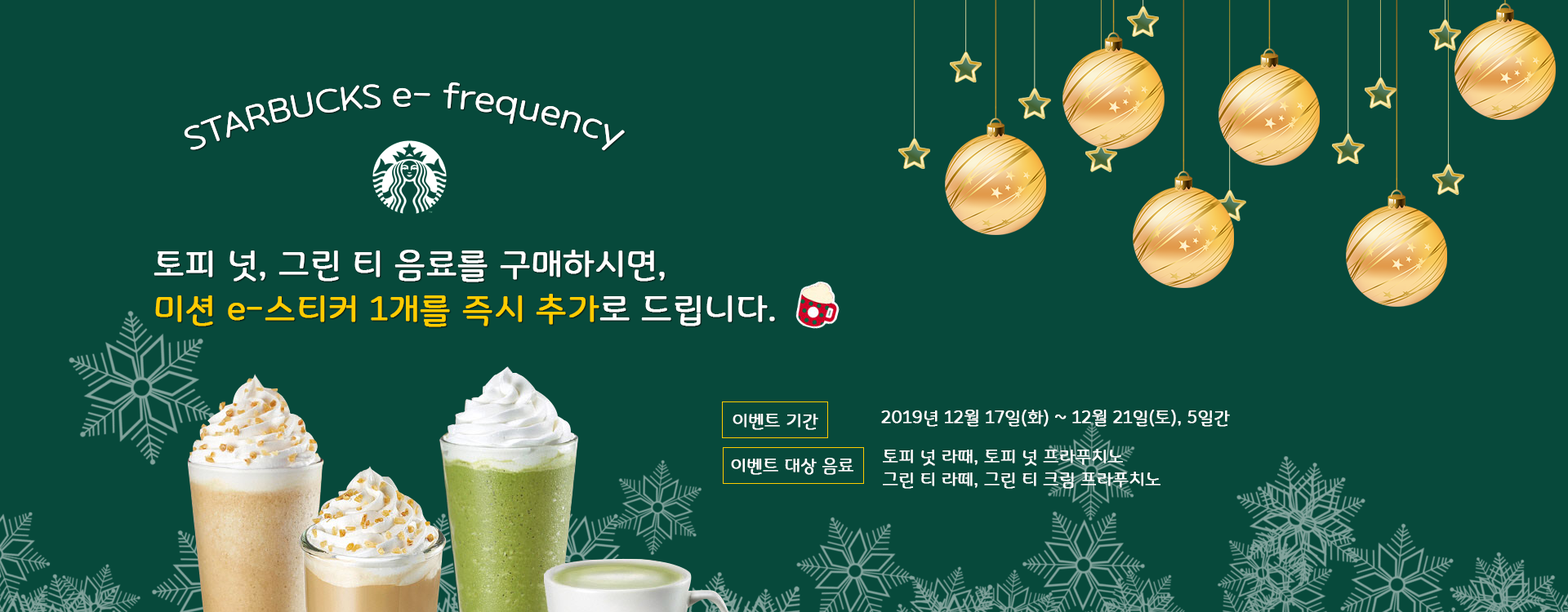
<style>
.page{position:relative;width:1568px;height:612px;background:#07493b}
.page>*{position:absolute;margin:0}
.t1{font:33.6px/22.5px "Binggrae";letter-spacing:-0.02em;color:#ffffff}
.t2{font:32px/22.5px "Binggrae";letter-spacing:-0.02em;color:#ffffff}
.t3{font:32px/22.5px "Binggrae";letter-spacing:-0.02em;color:#ffffff;font-weight:bold}
.t4{font:32px/22.5px "Binggrae";letter-spacing:-0.02em;color:#ffcc00;font-weight:bold}
.t5{font:16.3px "Binggrae";letter-spacing:-0.02em;color:#ffffff;font-weight:bold}
.t6{font:16.3px/22.5px "Binggrae";letter-spacing:-0.02em;color:#ffffff;font-weight:bold}
</style>
<div class="page">
<p class="t1" style="left:184px;top:82px;width:441px;height:69px"><span class="t2">STARBUCKS </span>e- frequency</p>
<p class="t1" style="left:184px;top:82px;width:441px;height:69px"><span class="t2">STARBUCKS </span>e- frequency</p>
<p class="t3" style="left:154px;top:250px;width:621px;height:77px">토피 넛, 그린 티 음료를 구매하시면,<br><br><span class="t4">미션 e-스티커 1개를 즉시 추가</span>로 드립니다.</p>
<p class="t5" style="left:881px;top:410px;width:349px;height:17px">2019년 12월 17일(화) ~ 12월 21일(토), 5일간</p>
<p class="t5" style="left:733px;top:414px;width:85px;height:16px">이벤트 기간</p>
<p class="t6" style="left:883px;top:449px;width:277px;height:40px">토피 넛 라때, 토피 넛 프라푸치노<br>그린 티 라떼, 그린 티 크림 프라푸치노</p>
<p class="t5" style="left:731px;top:458px;width:122px;height:17px">이벤트 대상 음료</p>
</div>
